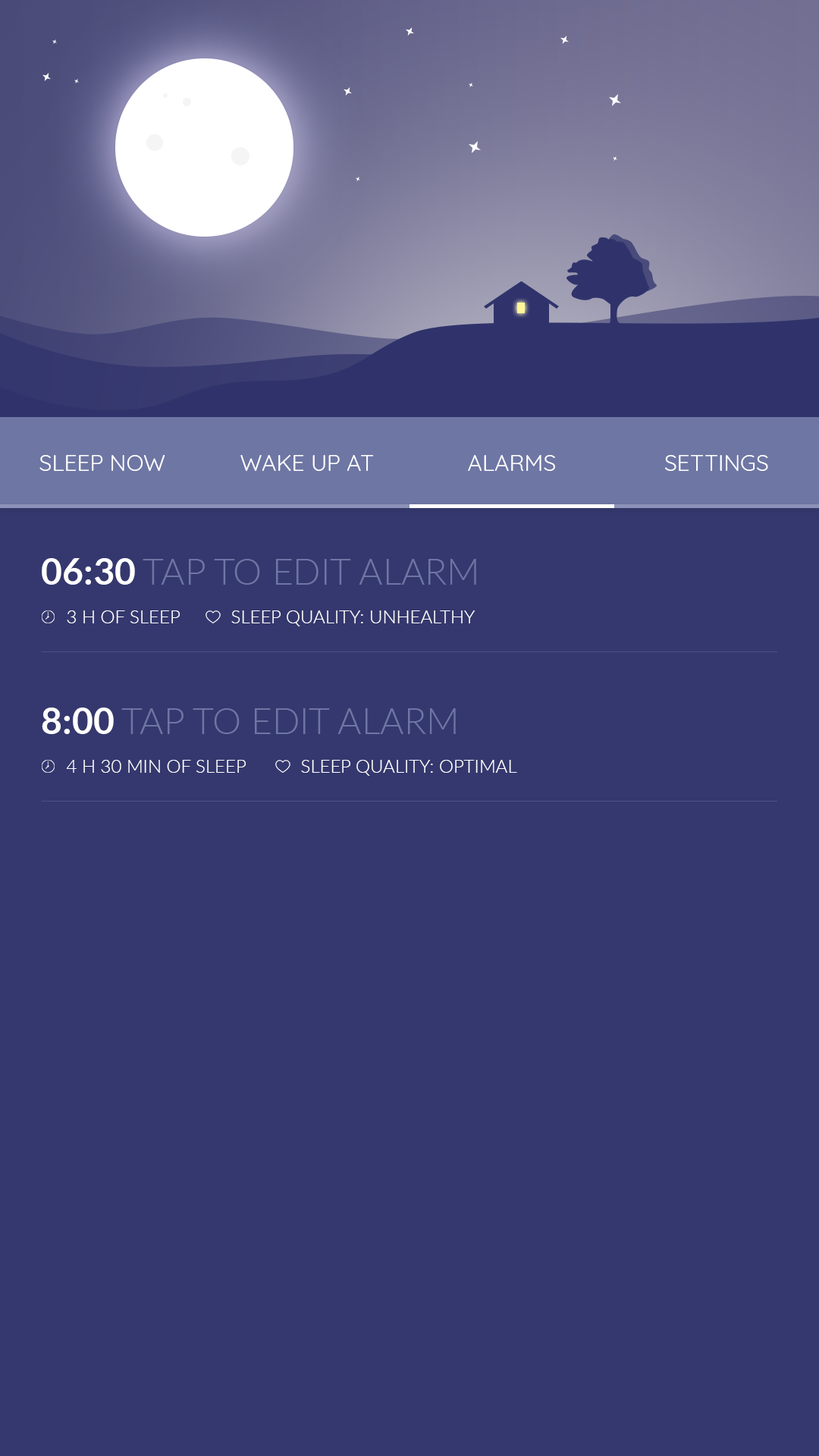
<style>
.page{position:relative;width:819px;height:1456px;background:#35386e}
.page>*{position:absolute;margin:0}
.t1{font:22.7px "Quicksand-Regular";color:#ffffff}
.t2{font:36.4px "Lato-Light";color:#6e76a4;text-transform:uppercase}
.t3{font:36.4px "Lato-Bold";color:#ffffff;text-transform:uppercase}
.t4{font:18.2px "Lato-Light";color:#ffffff;text-transform:uppercase}
</style>
<div class="page">
<p class="t1" style="left:39px;top:455px;width:126px;height:16px">SLEEP NOW</p>
<p class="t1" style="left:240px;top:455px;width:134px;height:16px">WAKE UP AT</p>
<p class="t1" style="left:468px;top:455px;width:87px;height:16px">ALARMS</p>
<p class="t1" style="left:665px;top:455px;width:103px;height:16px">SETTINGS</p>
<p class="t2" style="left:42px;top:558px;width:434px;height:27px"><span class="t3">06:30 </span>TAP TO EDIT ALARM</p>
<p class="t4" style="left:67px;top:610px;width:113px;height:13px">3 h of sleep</p>
<p class="t4" style="left:231px;top:610px;width:244px;height:16px">SLEEP QUALITY: UNHEALTHY</p>
<p class="t2" style="left:42px;top:708px;width:414px;height:26px"><span class="t3">8:00 </span>TAP TO EDIT ALARM</p>
<p class="t4" style="left:66px;top:760px;width:180px;height:13px">4 h 30 min of sleep</p>
<p class="t4" style="left:301px;top:760px;width:216px;height:16px">SLEEP QUALITY: OPTIMAL</p>
</div>
